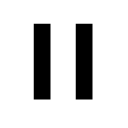
<style>
.page{position:relative;width:128px;height:128px;background:#ffffff}
.page>*{position:absolute;margin:0}
.t1{font:82.5px "Arial-Black";letter-spacing:0.04em;color:#000000;scale:1.6 1}
</style>
<div class="page">
<p class="t1" style="left:33px;top:23px;width:60px;height:77px">||</p>
</div>
